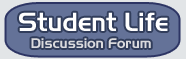
<style>
.page{position:relative;width:186px;height:59px;background:#647298}
.page>*{position:absolute;margin:0}
.t1{font:26px "Slicker";color:#ffffff}
.t2{font:14px "Slicker";color:#dadadd}
</style>
<div class="page">
<p class="t1" style="left:19px;top:12px;width:149px;height:19px">Student Life</p>
<p class="t2" style="left:31px;top:38px;width:120px;height:10px">Discussion Forum</p>
</div>
